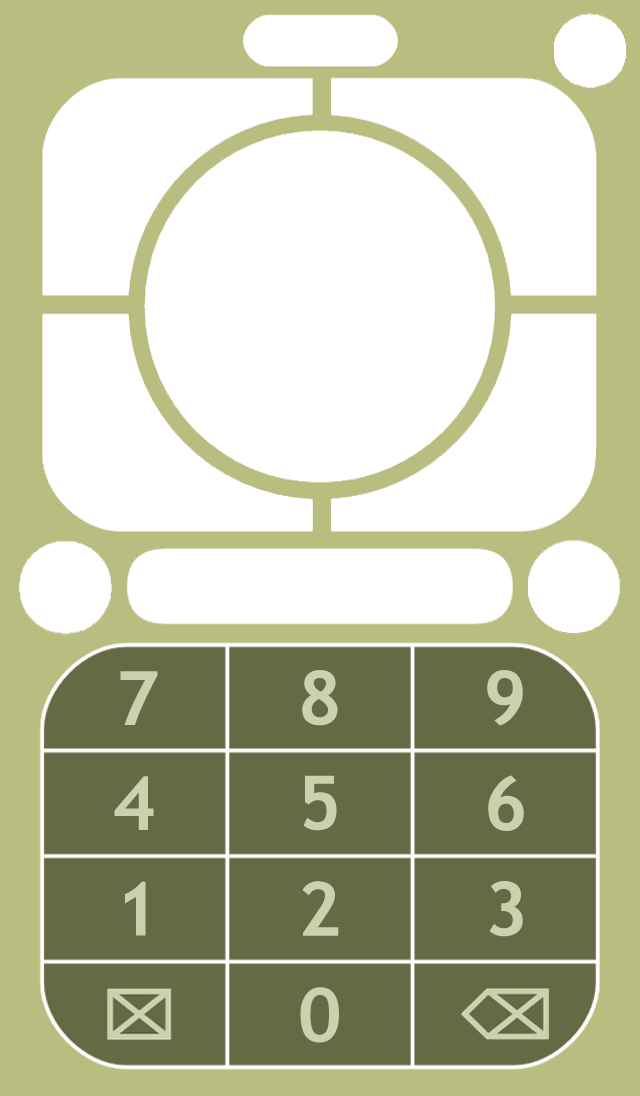
<style>
.page{position:relative;width:640px;height:1096px;background:#ffffff}
.page>*{position:absolute;margin:0}
.t1{font:75px "TrebuchetMS-Bold";letter-spacing:0.1em;color:#cdd0af}
</style>
<div class="page">
<p class="t1" style="left:120px;top:671px;width:38px;height:54px">7</p>
<p class="t1" style="left:302px;top:670px;width:36px;height:56px">8</p>
<p class="t1" style="left:487px;top:670px;width:36px;height:56px">9</p>
<p class="t1" style="left:114px;top:776px;width:40px;height:54px">4</p>
<p class="t1" style="left:303px;top:775px;width:34px;height:56px">5</p>
<p class="t1" style="left:488px;top:775px;width:36px;height:56px">6</p>
<p class="t1" style="left:125px;top:881px;width:21px;height:55px">1</p>
<p class="t1" style="left:302px;top:881px;width:37px;height:55px">2</p>
<p class="t1" style="left:489px;top:881px;width:34px;height:56px">3</p>
<p class="t1" style="left:300px;top:987px;width:39px;height:56px">0</p>
</div>
